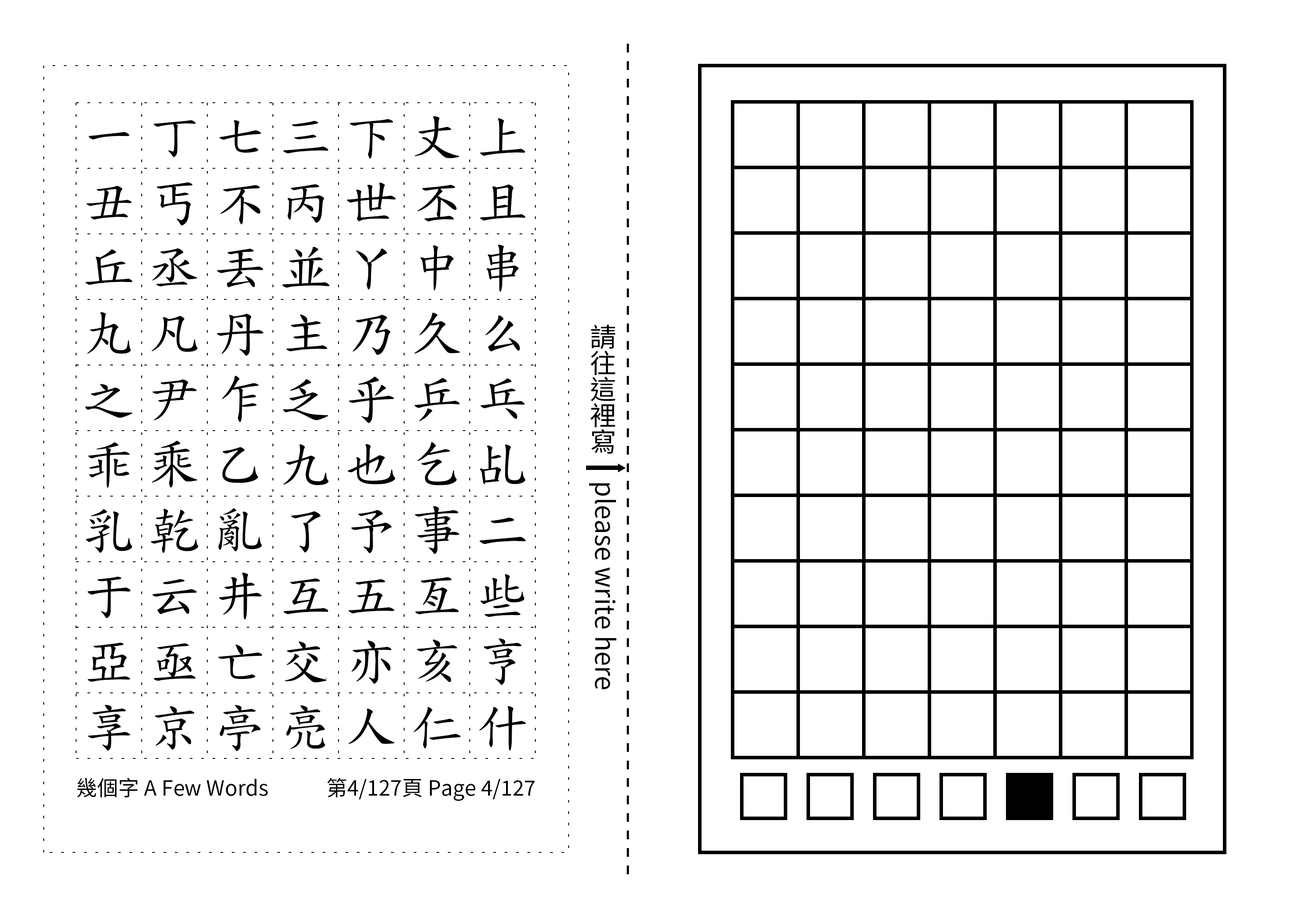
<style>
.page{position:relative;width:1299px;height:918px;background:#ffffff}
.page>*{position:absolute;margin:0}
.t1{font:52.5px/65.6px "TW-Kai-98_1";letter-spacing:0.25em;color:#000000}
.t2{font:26.2px "SourceHanSansTC-Regular";color:#000000}
.t3{font:21px "SourceHanSansTC-Regular";color:#000000}
</style>
<div class="page">
<p class="t1" style="left:85px;top:116px;width:441px;height:636px;text-align:center">一丁七三下丈上丑丐不丙世丕且丘丞丟並丫中串丸凡丹主乃久么之尹乍乏乎乒乓乖乘乙九也乞乩乳乾亂了予事二于云井互五亙些亞亟亡交亦亥亨享京亭亮人仁什</p>
<p class="t2" style="left:589px;top:324px;width:28px;height:366px;text-align:center">請往這裡寫　please write here</p>
<p class="t3" style="left:77px;top:778px;width:191px;height:20px">幾個字 A Few Words</p>
<p class="t3" style="left:327px;top:778px;width:208px;height:23px">第4/127頁 Page 4/127</p>
</div>
